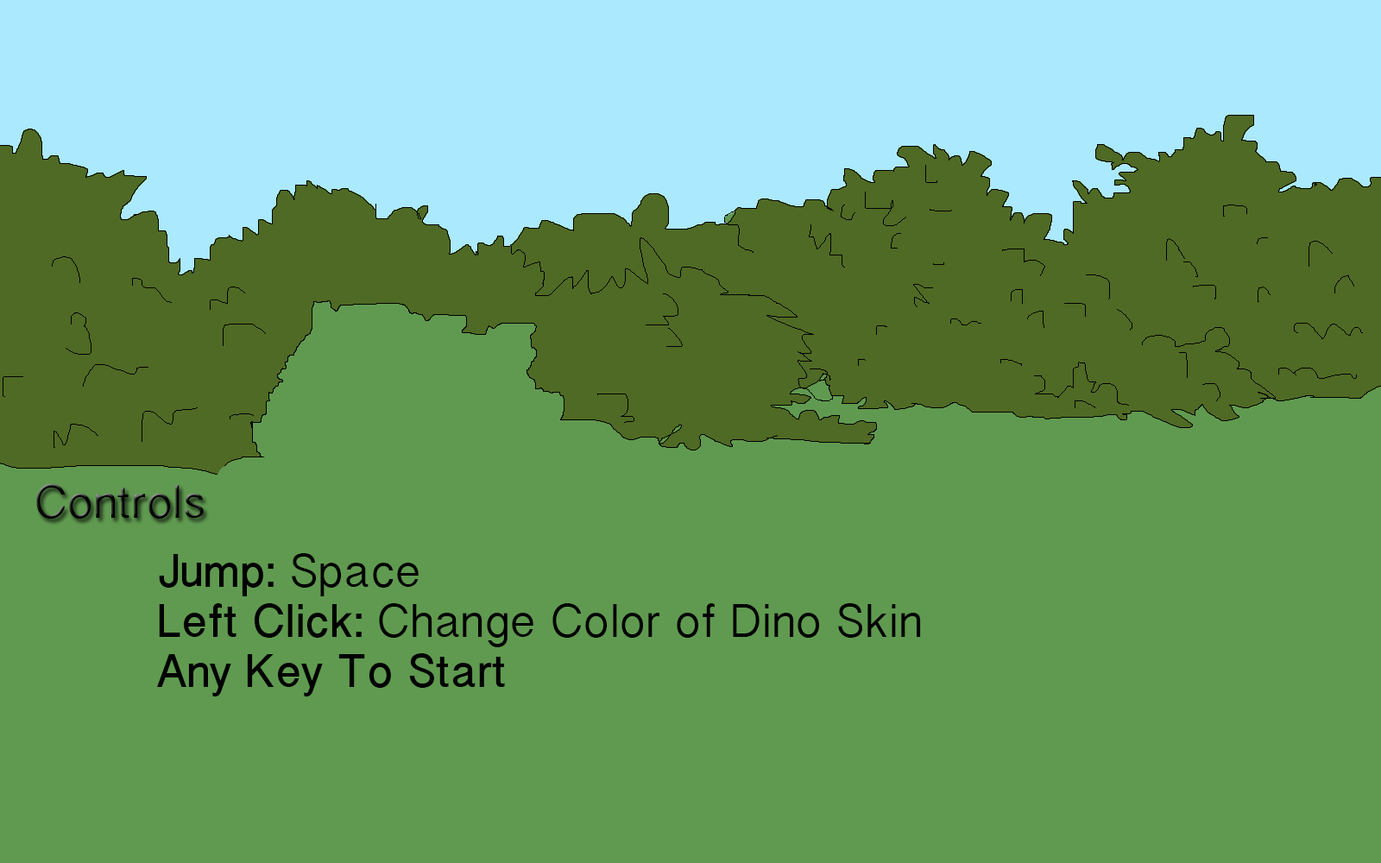
<style>
.page{position:relative;width:1381px;height:863px;background:#609a50}
.page>*{position:absolute;margin:0}
.t1{font:41.4px "BanglaSangamMN";color:#000000}
.t2{font:41.4px "BanglaSangamMN-Bold";color:#000000}
</style>
<div class="page">
<p class="t1" style="left:36px;top:484px;width:168px;height:35px">Controls</p>
<p class="t1" style="left:157px;top:553px;width:764px;height:144px"><span class="t2">Jump:</span> Space<br><span class="t2">Left Click: </span>Change Color of Dino Skin <br><span class="t2">Any Key To Start</span></p>
</div>
